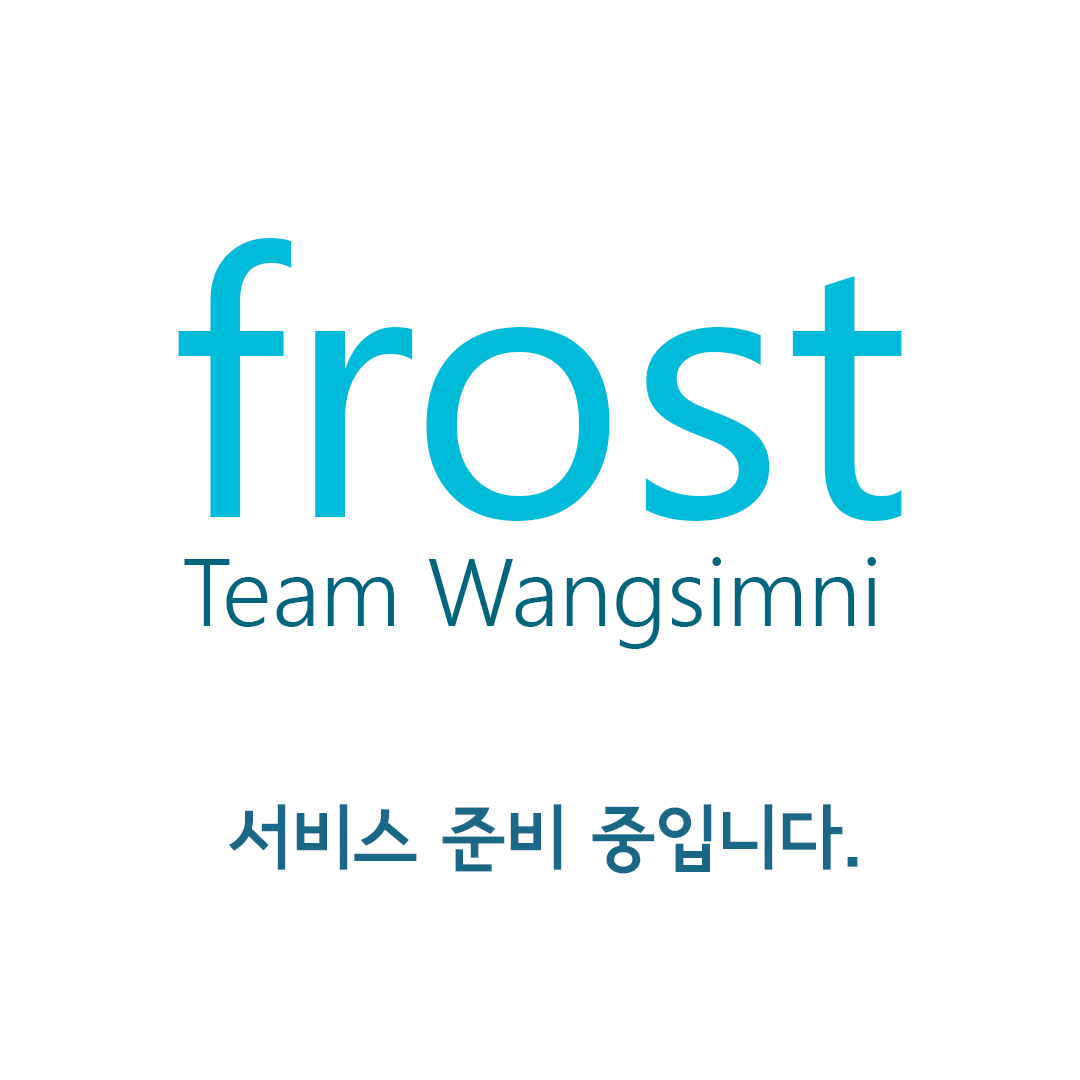
<style>
.page{position:relative;width:1080px;height:1080px;background:#ffffff}
.page>*{position:absolute;margin:0}
.t1{font:372px "SegoeUI";color:#00bcda}
.t2{font:96px "SegoeUI-Semilight";color:#00667d}
.t3{font:72px "SeoulNamsanEB";color:#1a6887}
</style>
<div class="page">
<p class="t1" style="left:178px;top:238px;width:724px;height:283px">frost</p>
<p class="t2" style="left:184px;top:557px;width:692px;height:92px">Team Wangsimni</p>
<p class="t3" style="left:228px;top:804px;width:630px;height:70px">서비스 준비 중입니다.</p>
</div>
